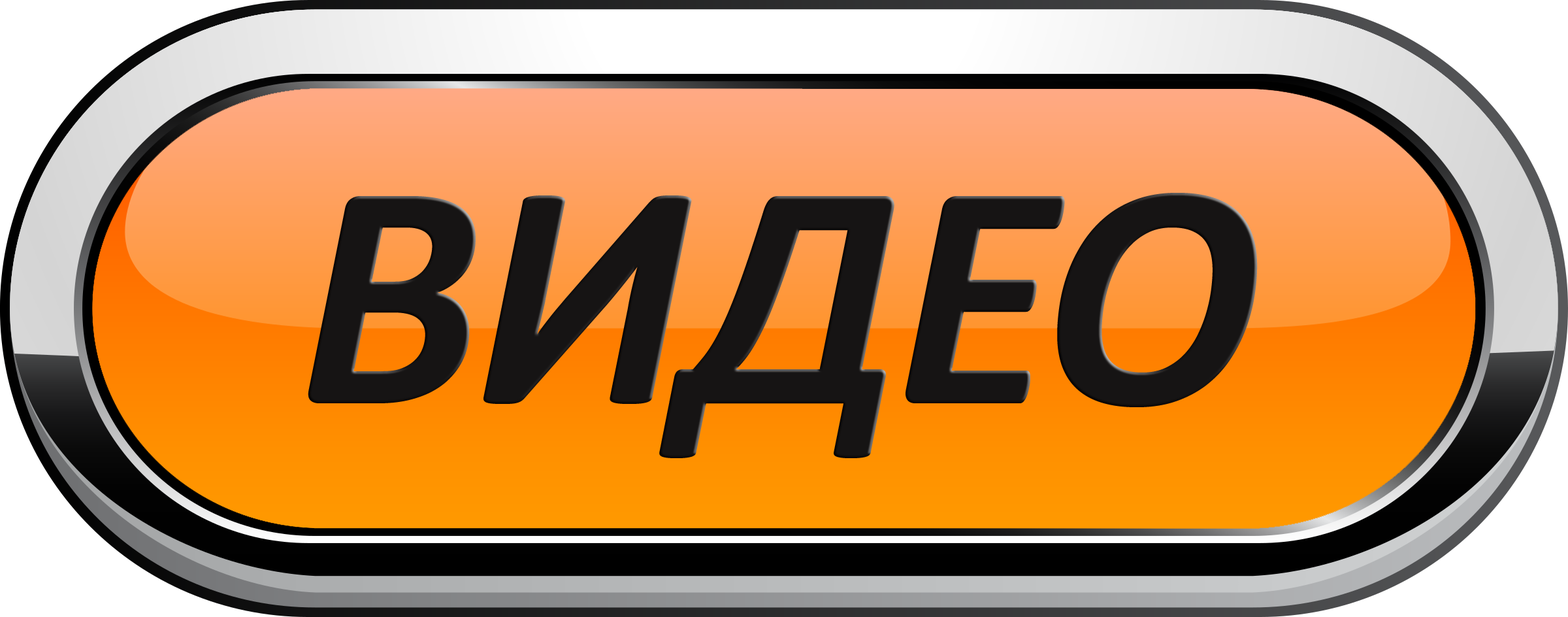
<style>
.page{position:relative;width:1568px;height:617px}
.page>*{position:absolute;margin:0}
.t1{font:327.2px "Calibri-BoldItalic";letter-spacing:-0.02em;color:#161414}
</style>
<div class="page">
<p class="t1" style="left:308px;top:193px;width:950px;height:265px">ВИДЕО</p>
</div>
